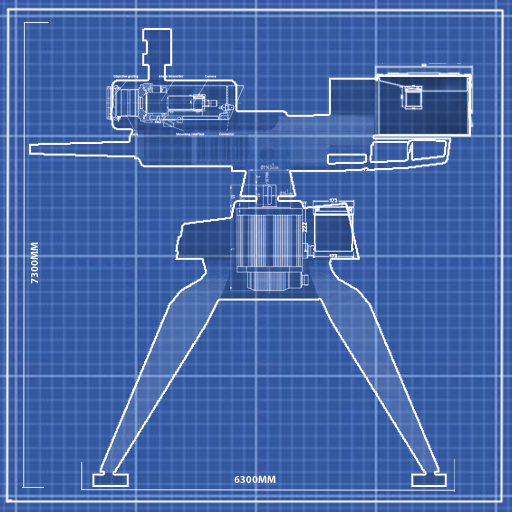
<style>
.page{position:relative;width:512px;height:512px}
.page>*{position:absolute;margin:0}
.t1{font:10.7px "MyriadPro-Bold";color:#ffffff;text-transform:uppercase}
</style>
<div class="page">
<p class="t1" style="left:30px;top:242px;width:8px;height:42px;rotate:-90deg">7300mm</p>
<p class="t1" style="left:234px;top:475px;width:42px;height:8px">6300mm</p>
</div>
